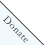
<style>
.page{position:relative;width:45px;height:45px;background:#ffffff}
.page>*{position:absolute;margin:0}
.t1{font:18px "Garamond";letter-spacing:0.04em}
</style>
<div class="page">
<p class="t1" style="left:2px;top:15px;width:26px;height:28px;rotate:46deg">Donate</p>
</div>
